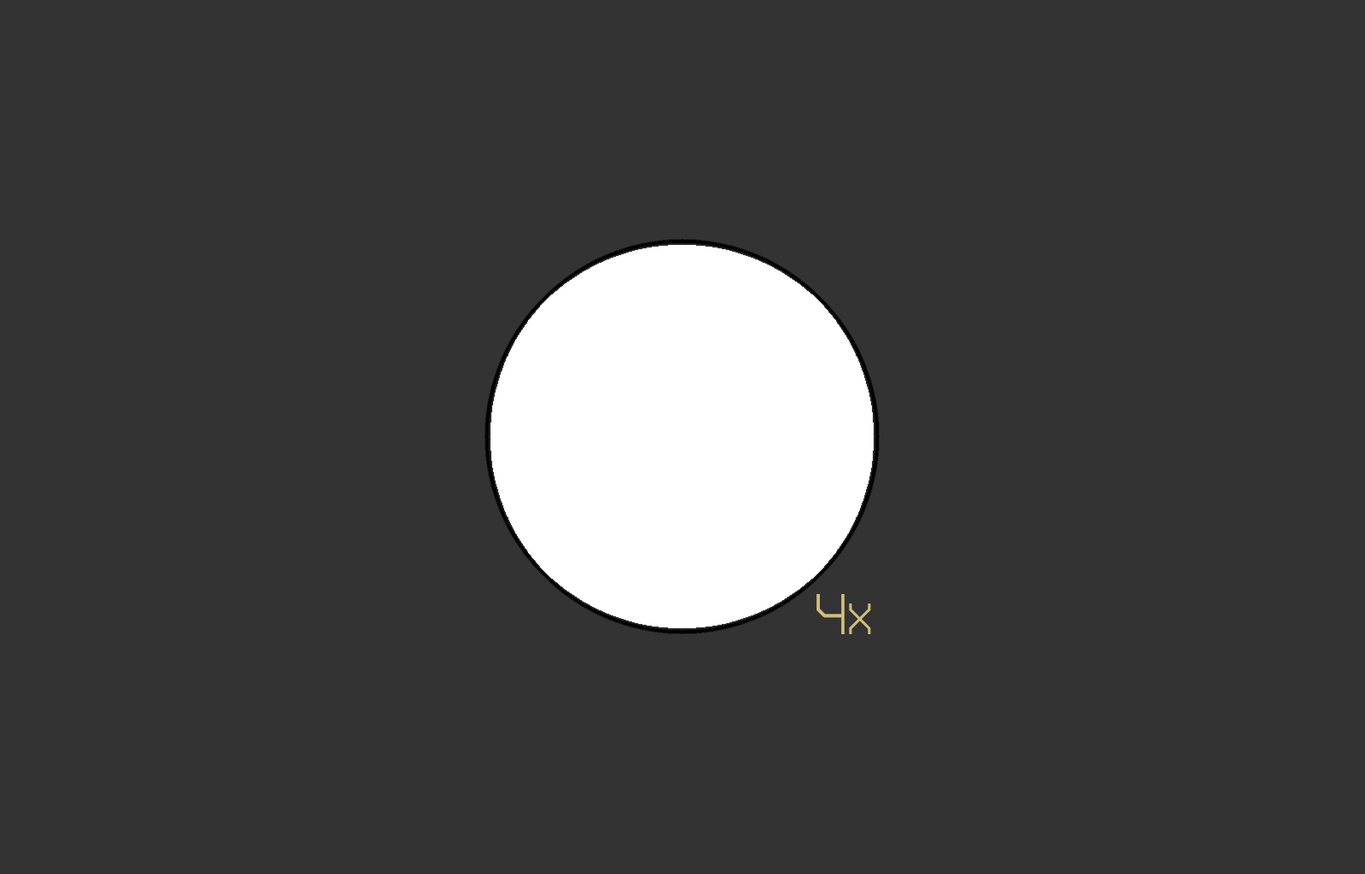
<style>
.page{position:relative;width:1365px;height:874px;background:#333333}
.page>*{position:absolute;margin:0}
.t1{font:57.2px "Arame-Thin";color:#d2bf7a}
.t2{font:43.5px "Arame-Thin";color:#d2bf7a}
</style>
<div class="page">
<p class="t1" style="left:816px;top:594px;width:55px;height:40px">4<span class="t2">x</span></p>
</div>
